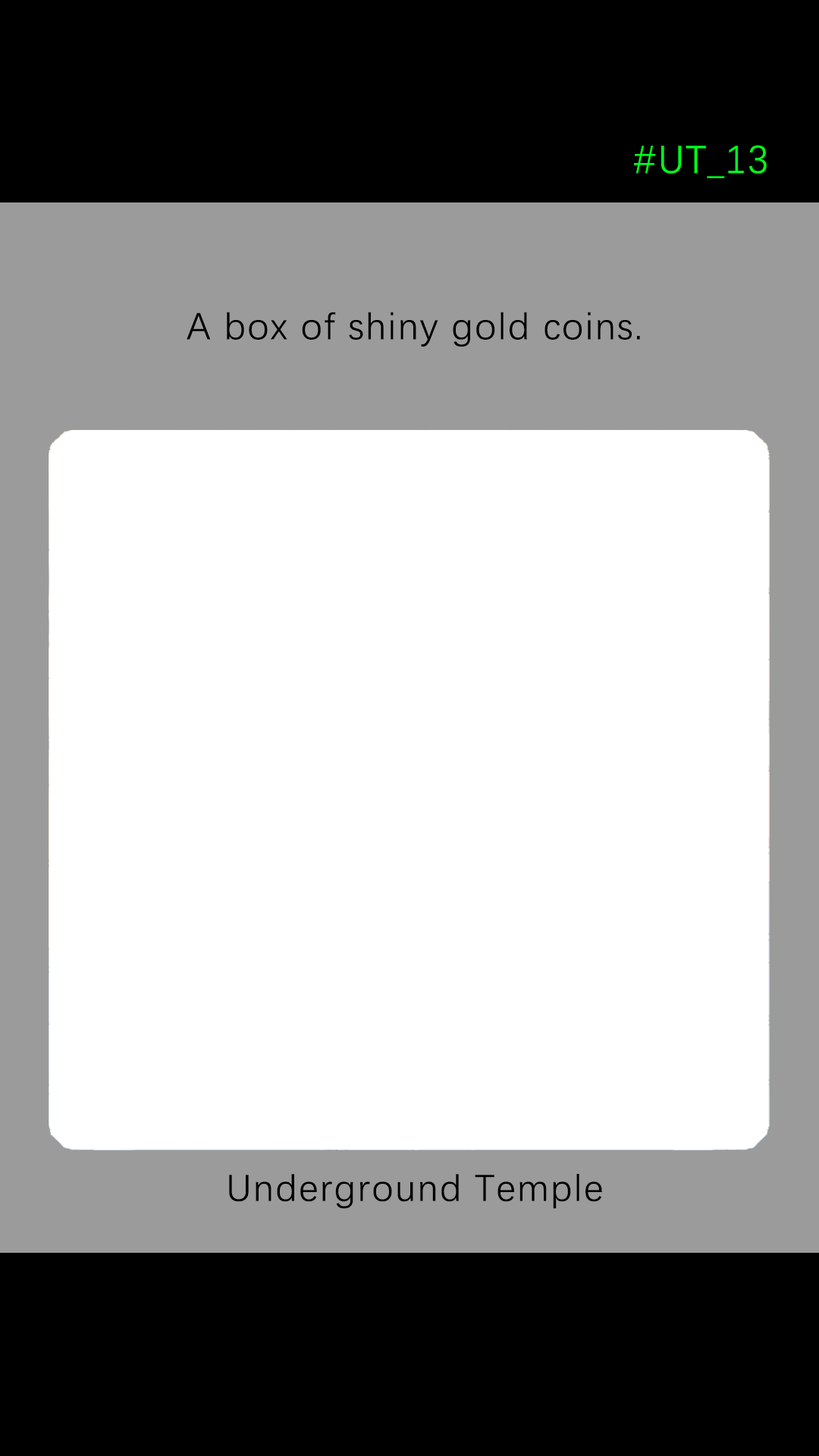
<style>
.page{position:relative;width:819px;height:1456px;background:#ffffff}
.page>*{position:absolute;margin:0}
.t1{font:39.2px "DengXian-Regular";letter-spacing:0.04em;color:#00ff1e}
.t2{font:37.9px "DengXian-Regular";letter-spacing:0.04em;color:#000000}
</style>
<div class="page">
<p class="t1" style="left:634px;top:145px;width:133px;height:33px">#UT_13</p>
<p class="t2" style="left:187px;top:312px;width:453px;height:35px">A box of shiny gold coins.</p>
<p class="t2" style="left:229px;top:1174px;width:373px;height:35px">Underground Temple</p>
</div>
